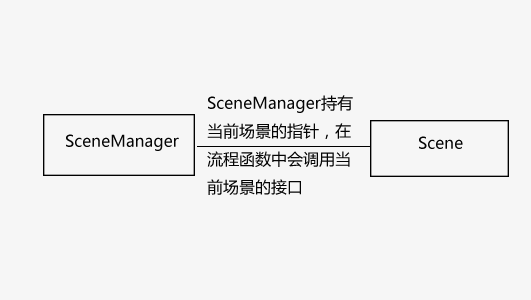
<style>
.page{position:relative;width:531px;height:300px;background:#f6f6f6}
.page>*{position:absolute;margin:0}
.t1{font:12px "MicrosoftYaHei";color:#050505}
</style>
<div class="page">
<p class="t1" style="left:207px;top:95px;width:146px;height:100px">SceneManager持有当前场景的指针，在流程函数中会调用当前场景的接口</p>
<p class="t1" style="left:66px;top:134px;width:113px;height:17px">SceneManager</p>
<p class="t1" style="left:419px;top:136px;width:44px;height:13px">Scene</p>
</div>
